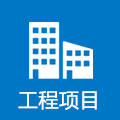
<style>
.page{position:relative;width:120px;height:120px;background:#0077c5}
.page>*{position:absolute;margin:0}
.t1{font:20px "MicrosoftYaHei";letter-spacing:0.025em;color:#ffffff}
</style>
<div class="page">
<p class="t1" style="left:18px;top:91px;width:79px;height:19px">工程项目</p>
</div>
